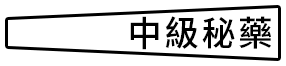
<style>
.page{position:relative;width:286px;height:66px;background:#ffffff}
.page>*{position:absolute;margin:0}
.t1{font:35px "NotoSansCJKtc-Medium";letter-spacing:0.06em;color:#000000}
</style>
<div class="page">
<p class="t1" style="left:130px;top:16px;width:141px;height:34px">中級秘藥</p>
</div>
